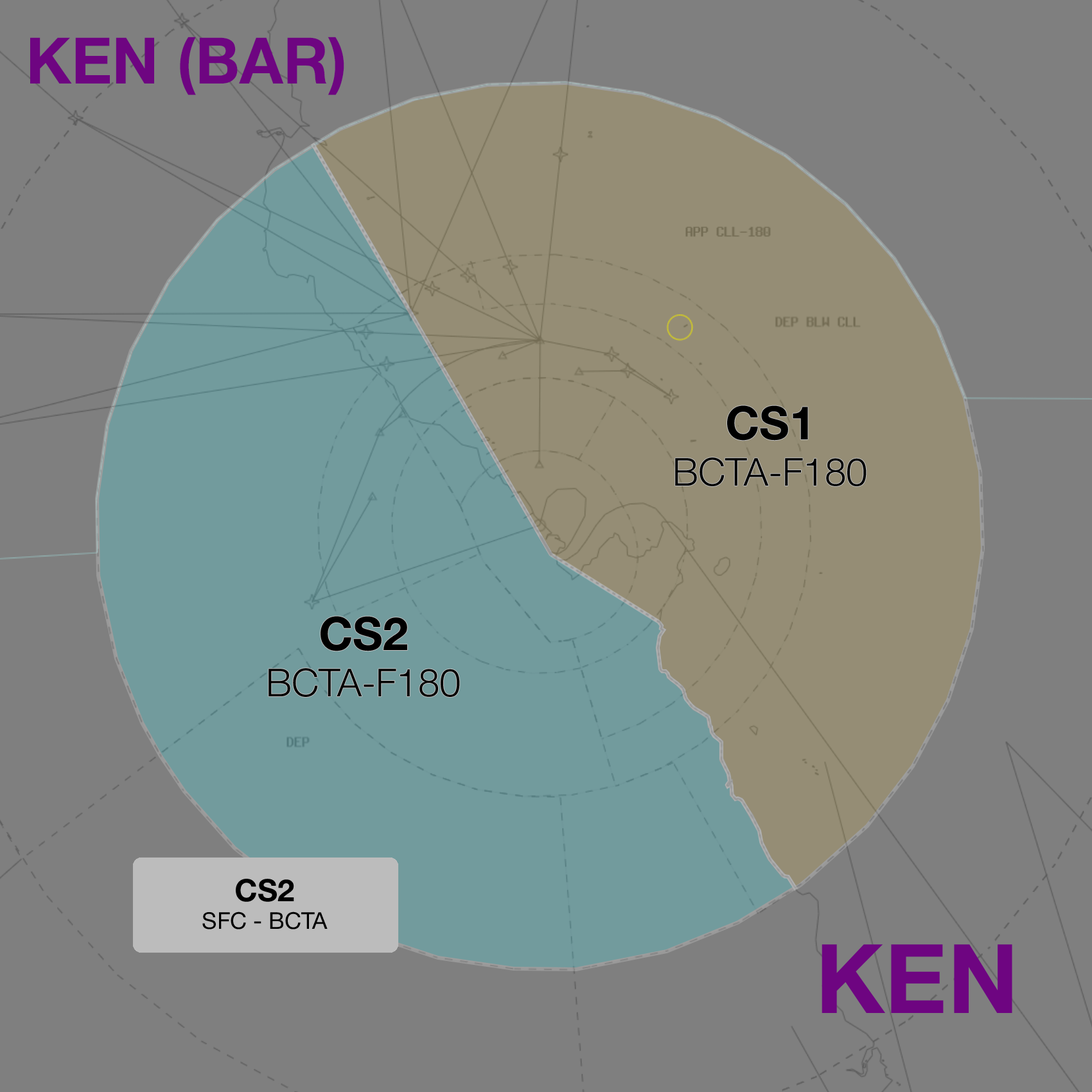
<style>
.page{position:relative;width:1092px;height:1092px;background:#7f7f7f}
.page>*{position:absolute;margin:0}
.t1{font:64.2px "HelveticaNeue-Bold";color:#6e0581}
.t2{font:38.5px "HelveticaNeue-Light";color:#000000}
.t3{font:46.2px "HelveticaNeue-Bold";color:#000000}
.t4{font:23.1px "HelveticaNeue-Roman";color:#000000}
.t5{font:30.8px "HelveticaNeue-Bold";color:#000000}
.t6{font:96.4px "HelveticaNeue-Bold";color:#6e0581}
</style>
<div class="page">
<p class="t1" style="left:30px;top:37px;width:314px;height:58px">KEN (BAR)</p>
<p class="t2" style="left:675px;top:405px;width:192px;height:81px;text-align:center"><span class="t3">CS1<br></span>BCTA-F180</p>
<p class="t2" style="left:268px;top:616px;width:192px;height:81px;text-align:center"><span class="t3">CS2<br></span>BCTA-F180</p>
<p class="t4" style="left:202px;top:879px;width:126px;height:50px;text-align:center"><span class="t5">CS2<br></span>SFC - BCTA</p>
<p class="t6" style="left:822px;top:944px;width:190px;height:69px">KEN</p>
</div>
